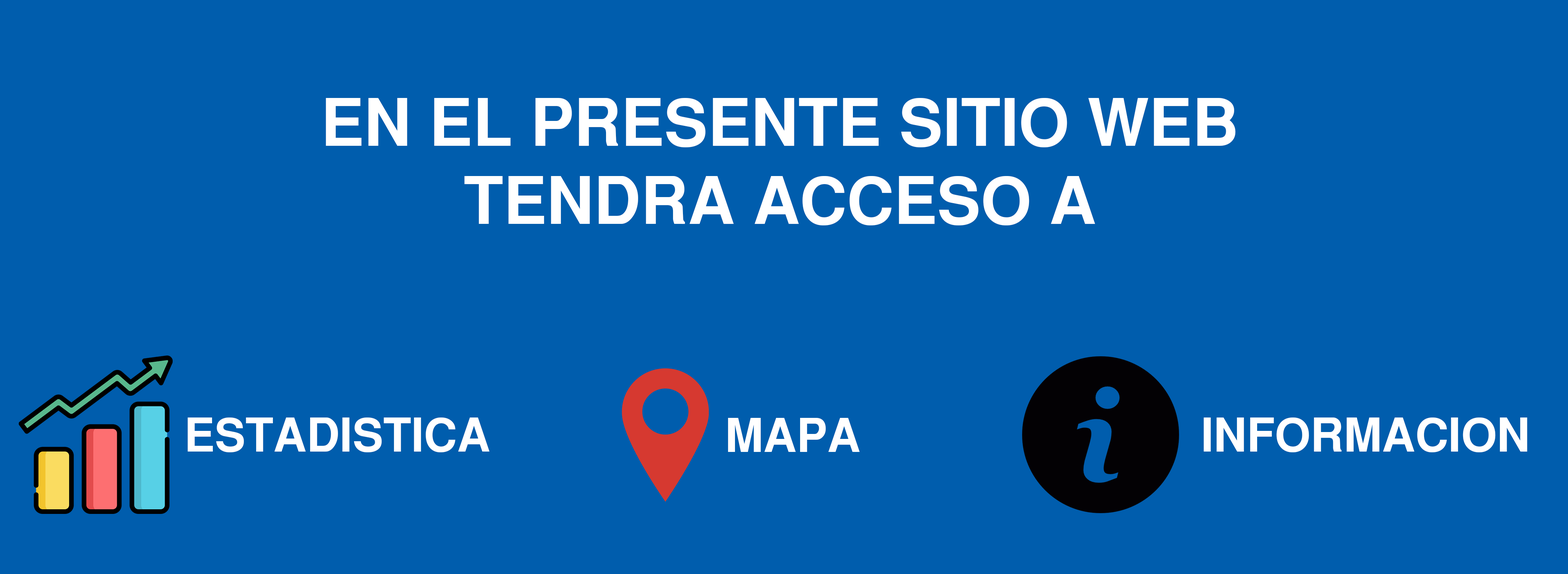
<style>
.page{position:relative;width:1568px;height:574px;background:#005dad}
.page>*{position:absolute;margin:0}
.t1{font:65.1px "SansSerifBold";color:#ffffff}
.t2{font:45.9px "SansSerifBold";color:#ffffff}
</style>
<div class="page">
<p class="t1" style="left:326px;top:98px;width:910px;height:127px;text-align:center">EN EL PRESENTE SITIO WEB<br>TENDRA ACCESO A</p>
<p class="t2" style="left:188px;top:418px;width:302px;height:34px">ESTADISTICA</p>
<p class="t2" style="left:728px;top:418px;width:132px;height:34px">MAPA</p>
<p class="t2" style="left:1204px;top:418px;width:323px;height:34px">INFORMACION</p>
</div>
